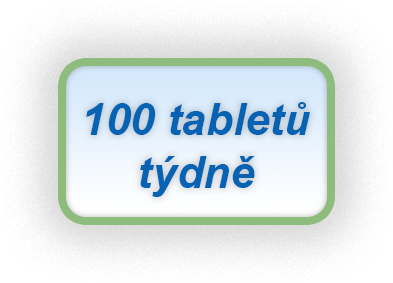
<style>
.page{position:relative;width:393px;height:283px}
.page>*{position:absolute;margin:0}
.t1{font:44px "Arial-BoldItalicMT";color:#0663b3}
</style>
<div class="page">
<p class="t1" style="left:86px;top:102px;width:224px;height:95px;text-align:center">100 tabletů týdně</p>
</div>
